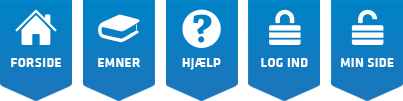
<style>
.page{position:relative;width:403px;height:101px;background:#ffffff}
.page>*{position:absolute;margin:0}
.t1{font:13.1px "KlavikaBold-Bold";letter-spacing:0.025em;color:#ffffff}
</style>
<div class="page">
<p class="t1" style="left:11px;top:58px;width:50px;height:9px">FORSIDE</p>
<p class="t1" style="left:98px;top:58px;width:43px;height:9px">EMNER</p>
<p class="t1" style="left:182px;top:58px;width:39px;height:12px">HJÆLP</p>
<p class="t1" style="left:261px;top:58px;width:47px;height:9px">LOG IND</p>
<p class="t1" style="left:340px;top:58px;width:54px;height:9px">MIN SIDE</p>
</div>
